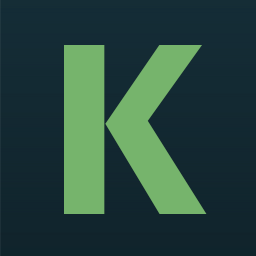
<style>
.page{position:relative;width:256px;height:256px;background:#76b46c}
.page>*{position:absolute;margin:0}
.t1{font:244.9px "FiraSans-Bold";color:#76b46c}
</style>
<div class="page">
<p class="t1" style="left:64px;top:45px;width:143px;height:169px">K</p>
</div>
